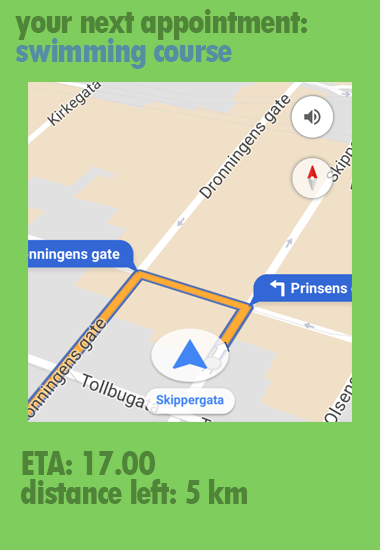
<style>
.page{position:relative;width:380px;height:550px;background:#7fcd5c}
.page>*{position:absolute;margin:0}
.t1{font:37.5px/29.2px "TwCenMT-CondensedExtraBold";letter-spacing:-0.05em}
.t2{font:37.5px/29.2px "TwCenMT-CondensedExtraBold";letter-spacing:-0.05em;color:#508439}
</style>
<div class="page">
<p class="t1" style="left:15px;top:9px;width:292px;height:60px">your next appointment:<br>swimming course</p>
<p class="t2" style="left:21px;top:451px;width:226px;height:53px">ETA: 17.00<br>distance left: 5 km</p>
</div>
